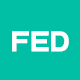
<style>
.page{position:relative;width:80px;height:80px;background:#00bfa5}
.page>*{position:absolute;margin:0}
.t1{font:48px "HYb2gj";color:#fdfdfd;font-weight:bold}
</style>
<div class="page">
<p class="t1" style="left:12px;top:31px;width:57px;height:21px">FED</p>
</div>
